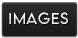
<style>
.page{position:relative;width:78px;height:38px}
.page>*{position:absolute;margin:0}
.t1{font:14px "LEMONMILK-Light";letter-spacing:0.05em;color:#ffffff}
</style>
<div class="page">
<p class="t1" style="left:9px;top:12px;width:59px;height:12px">IMAGES</p>
</div>
